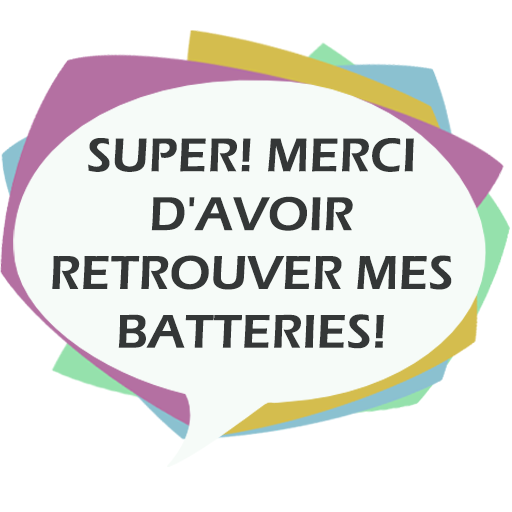
<style>
.page{position:relative;width:512px;height:512px;background:#f6fbf8}
.page>*{position:absolute;margin:0}
.t1{font:49px "ErasITC-Demi";color:#343737}
</style>
<div class="page">
<p class="t1" style="left:52px;top:138px;width:400px;height:211px;text-align:center">SUPER! MERCI D'AVOIR               RETROUVER MES BATTERIES!</p>
</div>
